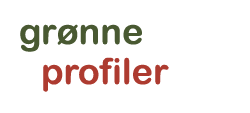
<style>
.page{position:relative;width:250px;height:113px;background:#ffffff}
.page>*{position:absolute;margin:0}
.t1{font:36px "ArialRoundedMTBold";color:#495932}
.t2{font:36px "ArialRoundedMTBold";color:#ad3b30}
</style>
<div class="page">
<p class="t1" style="left:20px;top:24px;width:122px;height:28px">grønne</p>
<p class="t2" style="left:43px;top:57px;width:126px;height:35px">profiler</p>
</div>
